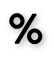
<style>
.page{position:relative;width:54px;height:58px;background:#ffffff}
.page>*{position:absolute;margin:0}
.t1{font:40px "KannadaSangamMN";color:#000000;font-weight:bold}
</style>
<div class="page">
<p class="t1" style="left:9px;top:13px;width:34px;height:31px">%</p>
</div>
